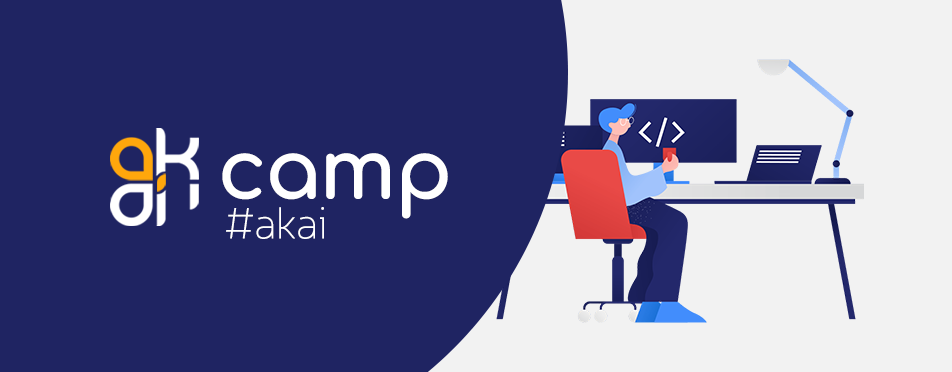
<style>
.page{position:relative;width:952px;height:372px;background:#1f2462}
.page>*{position:absolute;margin:0}
.t1{font:82.9px "Comfortaa-Bold";letter-spacing:-0.025em;color:#ffffff}
.t2{font:44.5px "Neris-Thin";letter-spacing:-0.025em;color:#ffffff}
</style>
<div class="page">
<p class="t1" style="left:222px;top:153px;width:226px;height:66px">camp</p>
<p class="t2" style="left:226px;top:207px;width:98px;height:32px">#akai</p>
</div>
